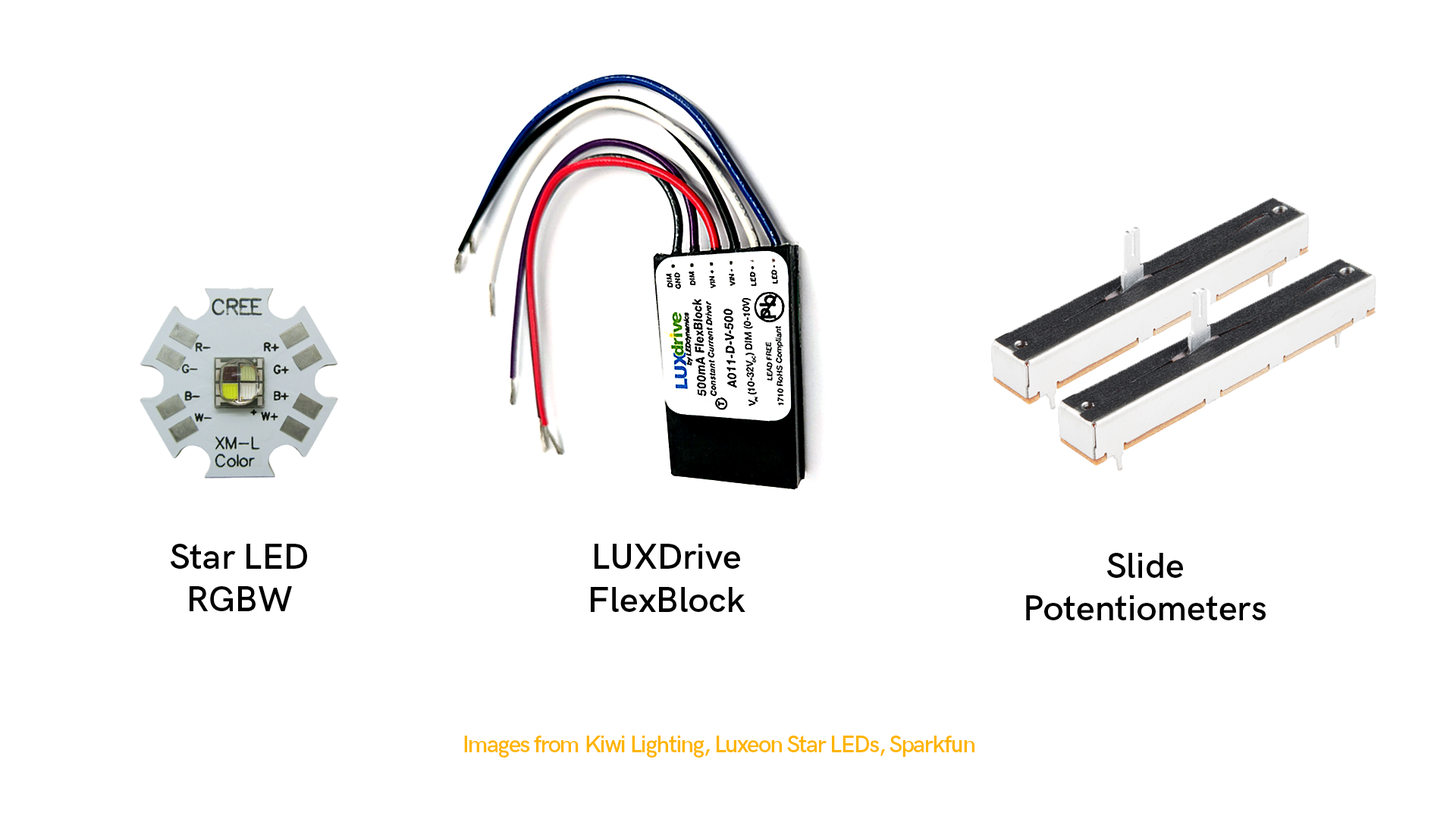
<style>
.page{position:relative;width:1456px;height:819px;background:#ffffff}
.page>*{position:absolute;margin:0}
.t1{font:35.7px "HKGrotesk-SemiBold";color:#000000}
.t2{font:23.5px "HKGrotesk-SemiBold";letter-spacing:-0.05em;color:#ffb400}
</style>
<div class="page">
<p class="t1" style="left:171px;top:544px;width:136px;height:67px;text-align:center">Star LED<br>RGBW</p>
<p class="t1" style="left:591px;top:544px;width:154px;height:68px;text-align:center">LUXDrive<br>FlexBlock</p>
<p class="t1" style="left:1026px;top:553px;width:240px;height:67px;text-align:center">Slide<br>Potentiometers</p>
<p class="t2" style="left:464px;top:735px;width:510px;height:23px">Images from Kiwi Lighting, Luxeon Star LEDs, Sparkfun</p>
</div>
